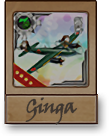
<style>
.page{position:relative;width:109px;height:136px}
.page>*{position:absolute;margin:0}
.t1{font:20px "VinerHandITC";letter-spacing:-0.08em;color:#3e3630;font-weight:bold}
</style>
<div class="page">
<p class="t1" style="left:25px;top:97px;width:53px;height:28px">Ginga</p>
</div>
